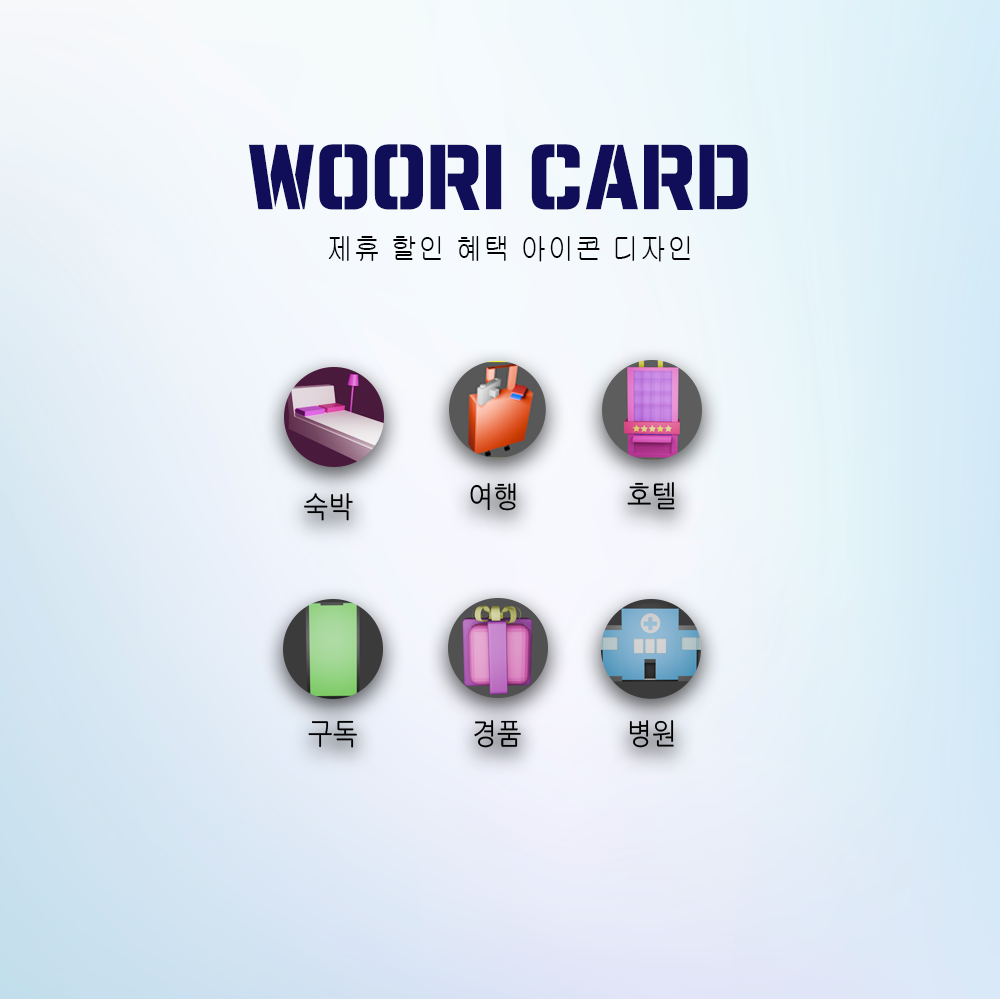
<style>
.page{position:relative;width:1000px;height:1000px}
.page>*{position:absolute;margin:0}
.t1{font:80px "Typo_SsangmunDong_St";letter-spacing:0.02em;color:#100d59;text-transform:uppercase;scale:0.9 1}
.t2{font:30px "Gulim";letter-spacing:0.02em;color:#010101;text-transform:uppercase;scale:0.9 1}
.t3{font:29px "NanumGothic";letter-spacing:0.02em;color:#000000;text-transform:uppercase;scale:0.9 1}
.t4{font:28.9px "NanumGothic";letter-spacing:0.02em;color:#000000;text-transform:uppercase;scale:0.9 1}
</style>
<div class="page">
<p class="t1" style="left:249px;top:144px;width:499px;height:66px">woori card</p>
<p class="t2" style="left:328px;top:236px;width:362px;height:26px">제휴 할인 혜택 아이콘 디자인</p>
<p class="t3" style="left:470px;top:483px;width:46px;height:28px">여행</p>
<p class="t3" style="left:627px;top:482px;width:48px;height:28px">호텔</p>
<p class="t3" style="left:304px;top:493px;width:49px;height:28px">숙박</p>
<p class="t3" style="left:308px;top:720px;width:49px;height:28px">구독</p>
<p class="t3" style="left:474px;top:720px;width:47px;height:28px">경품</p>
<p class="t4" style="left:629px;top:720px;width:45px;height:28px">병원</p>
</div>
